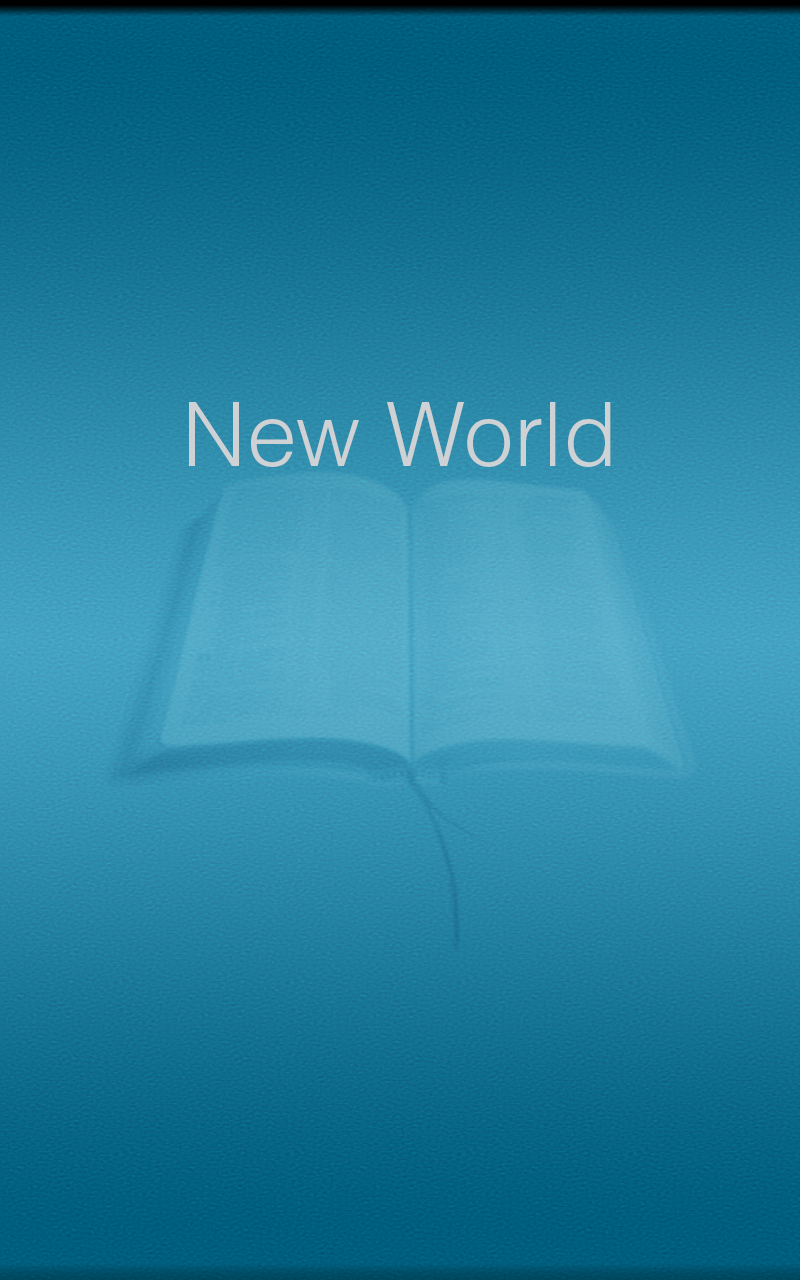
<style>
.page{position:relative;width:800px;height:1280px}
.page>*{position:absolute;margin:0}
.t1{font:89.5px "Helvetica-Light";color:#cfd2d4}
</style>
<div class="page">
<p class="t1" style="left:189px;top:402px;width:422px;height:65px">New World</p>
</div>
